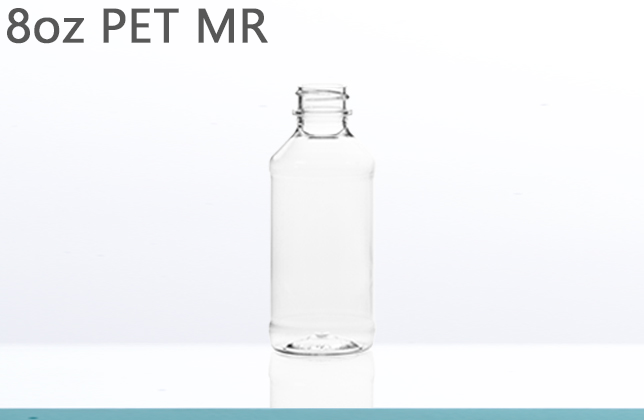
<style>
.page{position:relative;width:644px;height:420px}
.page>*{position:absolute;margin:0}
.t1{font:48px "Gadugi";color:#575757;font-weight:bold}
</style>
<div class="page">
<p class="t1" style="left:7px;top:8px;width:261px;height:36px">8oz PET MR</p>
</div>
